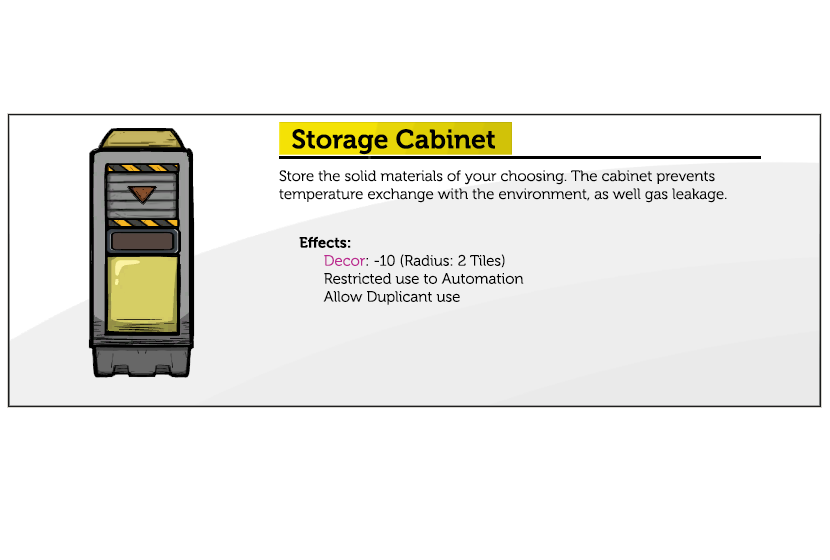
<style>
.page{position:relative;width:830px;height:560px;background:#ffffff}
.page>*{position:absolute;margin:0}
.t1{font:26.7px "Museo-700";color:#000000}
.t2{font:15px "Museo-300";color:#000000}
.t3{font:15px "Museo-700";color:#000000}
.t4{font:15px "Museo-300";color:#bc2991}
</style>
<div class="page">
<p class="t1" style="left:292px;top:129px;width:203px;height:26px">Storage Cabinet</p>
<p class="t2" style="left:279px;top:170px;width:448px;height:33px">Store the solid materials of your choosing. The cabinet prevents temperature exchange with the environment, as well gas leakage.</p>
<p class="t2" style="left:299px;top:236px;width:225px;height:69px"><span class="t3">Effects:<br>      </span><span class="t4">Decor</span>: -10 (Radius: 2 Tiles)<br>      Restricted use to Automation<br>      Allow Duplicant use</p>
</div>
